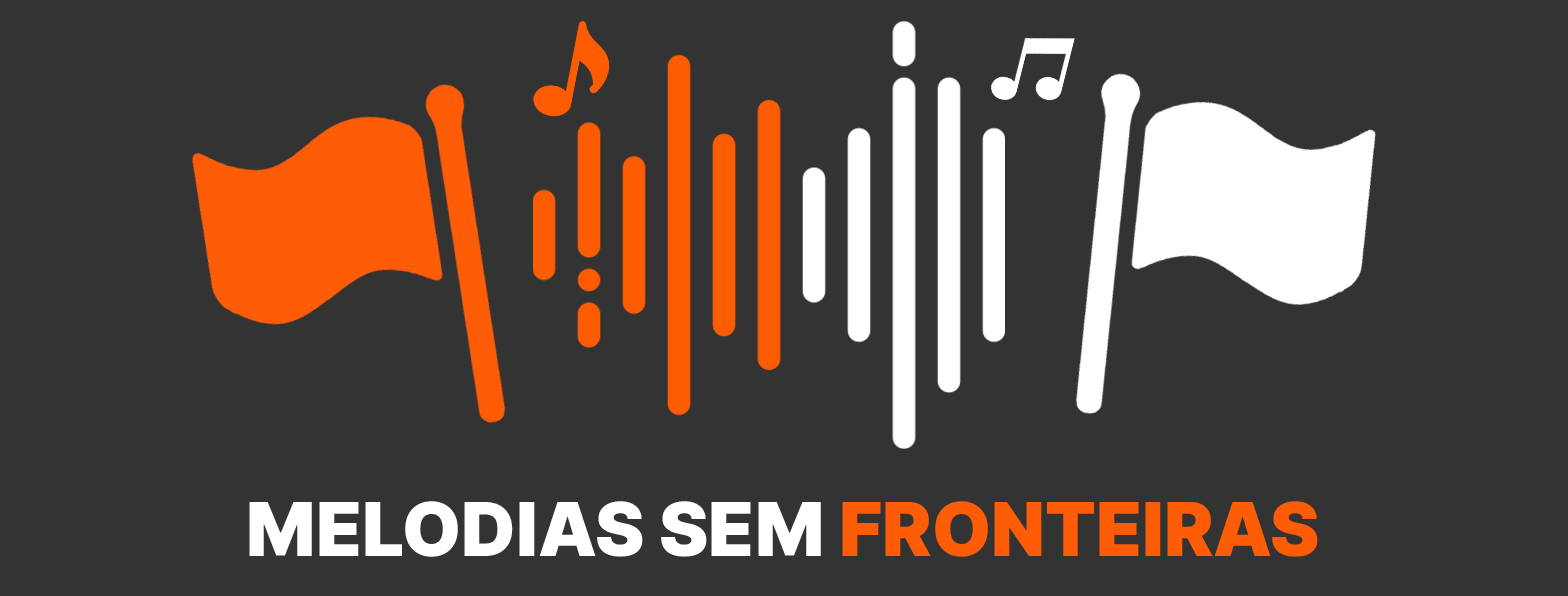
<style>
.page{position:relative;width:1568px;height:596px;background:#333333}
.page>*{position:absolute;margin:0}
.t1{font:74.4px "Inter-Black";color:#ffffff}
.t2{font:74.4px "Inter-Black";color:#fe5c06}
</style>
<div class="page">
<p class="t1" style="left:249px;top:501px;width:1069px;height:56px">MELODIAS SEM <span class="t2">FRONTEIRAS</span></p>
</div>
